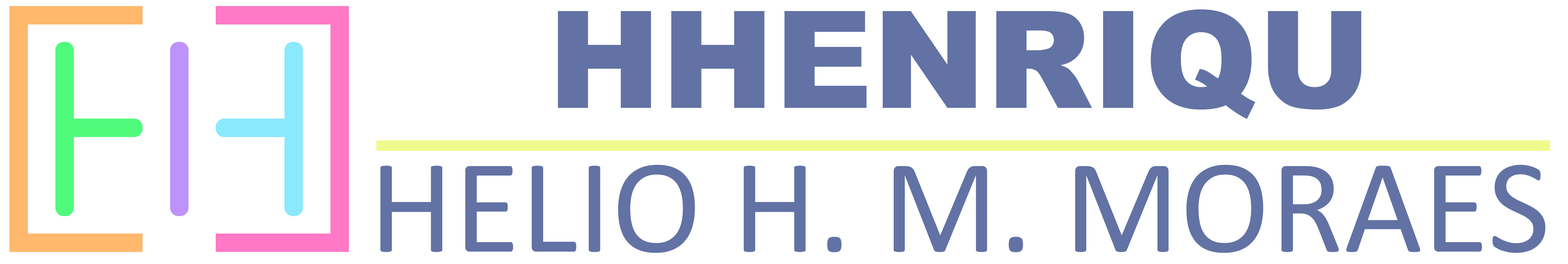
<style>
.page{position:relative;width:1568px;height:264px;background:#ffffff}
.page>*{position:absolute;margin:0}
.t1{font:135.6px/144.1px "Calibri";color:#6272a4}
.t2{font:135.6px/144.1px "Arial-Black";color:#6272a4}
</style>
<div class="page">
<p class="t1" style="left:380px;top:9px;width:1166px;height:244px;text-align:center"><span class="t2">HHENRIQU<br></span>HELIO H. M. MORAES</p>
</div>
